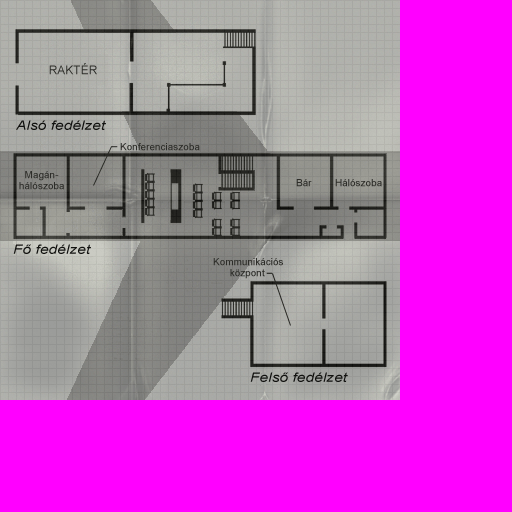
<style>
.page{position:relative;width:512px;height:512px;background:#ff00ff}
.page>*{position:absolute;margin:0}
.t1{font:12px "ArialMT";color:#2d2d29}
.t2{font:13px "Arial-ItalicMT";color:#11110f;scale:1.2 1}
.t3{font:10px "ArialMT";color:#2d2d29}
</style>
<div class="page">
<p class="t1" style="left:49px;top:63px;width:48px;height:12px">RAKTÉR</p>
<p class="t2" style="left:16px;top:120px;width:90px;height:10px">Alsó fedélzet</p>
<p class="t3" style="left:120px;top:143px;width:80px;height:8px">Konferenciaszoba</p>
<p class="t3" style="left:19px;top:171px;width:45px;height:19px">Magán-<br>hálószoba</p>
<p class="t3" style="left:296px;top:179px;width:16px;height:8px">Bár</p>
<p class="t3" style="left:335px;top:179px;width:47px;height:8px">Hálószoba</p>
<p class="t2" style="left:13px;top:244px;width:78px;height:10px">Fő fedélzet</p>
<p class="t3" style="left:213px;top:258px;width:70px;height:21px">Kommunikációs     <br>      központ</p>
<p class="t2" style="left:250px;top:372px;width:98px;height:10px">Felső fedélzet</p>
</div>
